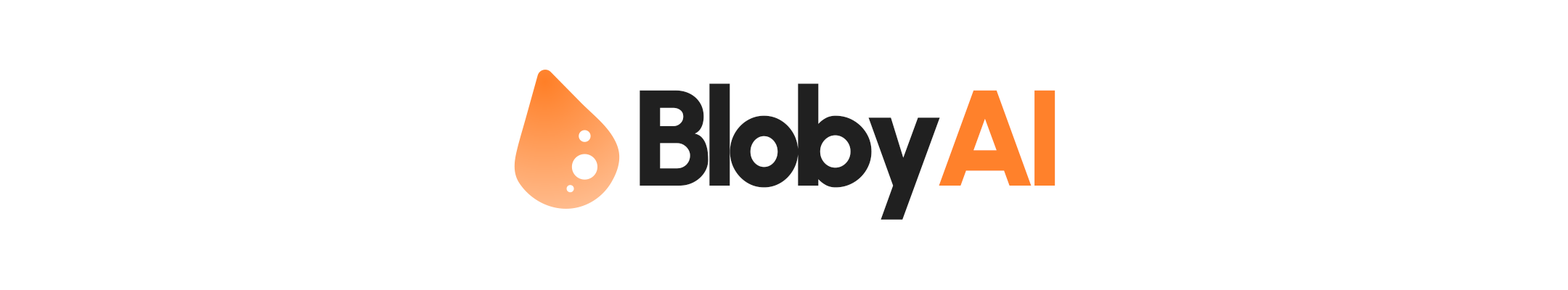
<style>
.page{position:relative;width:1568px;height:290px;background:#ffffff}
.page>*{position:absolute;margin:0}
.t1{font:136.1px "UrbanistRoman-Black";letter-spacing:-0.09em;color:#202020}
.t2{font:136.1px "UrbanistRoman-Black";letter-spacing:-0.09em;color:#ff812b}
</style>
<div class="page">
<p class="t1" style="left:640px;top:83px;width:415px;height:137px">Bloby<span class="t2">AI</span></p>
</div>
